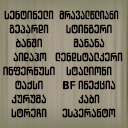
<style>
.page{position:relative;width:128px;height:128px}
.page>*{position:absolute;margin:0}
.t1{font:12px "ArchyEDT-Bold";color:#000000}
.t2{font:12px "ArchyEDT-Bold";color:#000000;scale:0.9 1}
</style>
<div class="page">
<p class="t1" style="left:4px;top:10px;width:50px;height:10px">სენტინელი</p>
<p class="t2" style="left:59px;top:10px;width:60px;height:10px">მრავალწლიანი</p>
<p class="t1" style="left:9px;top:24px;width:40px;height:10px">გეპარდი</p>
<p class="t1" style="left:66px;top:24px;width:46px;height:10px">სტინგერი</p>
<p class="t1" style="left:16px;top:38px;width:26px;height:10px">ბანში</p>
<p class="t1" style="left:73px;top:38px;width:32px;height:10px">მანანა</p>
<p class="t1" style="left:13px;top:52px;width:34px;height:10px">აიდაჰო</p>
<p class="t1" style="left:55px;top:52px;width:68px;height:10px">ლენდსტალკერი</p>
<p class="t1" style="left:3px;top:66px;width:52px;height:10px">ინფერნუსი</p>
<p class="t1" style="left:66px;top:66px;width:46px;height:10px">სტალიონი</p>
<p class="t1" style="left:15px;top:80px;width:28px;height:10px">ტაქსი</p>
<p class="t1" style="left:63px;top:80px;width:53px;height:10px">BF ინექცია</p>
<p class="t1" style="left:11px;top:94px;width:35px;height:10px">კურუმა</p>
<p class="t1" style="left:78px;top:94px;width:22px;height:10px">კაბი</p>
<p class="t1" style="left:11px;top:108px;width:36px;height:10px">სტრეჩი</p>
<p class="t1" style="left:62px;top:108px;width:54px;height:10px">ესპერანტო</p>
</div>
